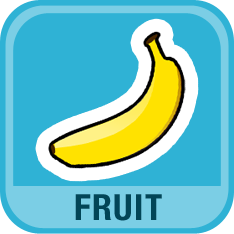
<style>
.page{position:relative;width:234px;height:234px;background:#2fb2d5}
.page>*{position:absolute;margin:0}
.t1{font:36px "HelveticaNeue-BoldCond";letter-spacing:0.04em;color:#024557}
</style>
<div class="page">
<p class="t1" style="left:75px;top:194px;width:87px;height:27px">FRUIT</p>
</div>
